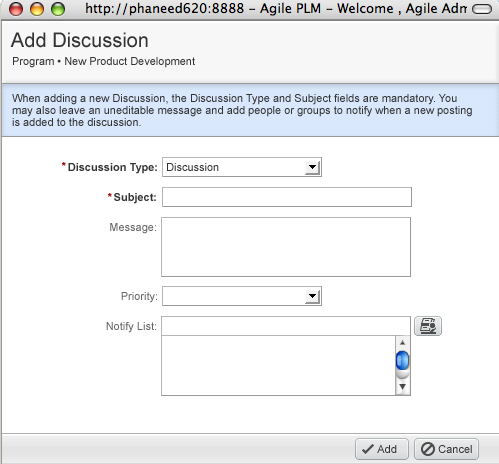
<style>
.page{position:relative;width:499px;height:464px;background:#ffffff}
.page>*{position:absolute;margin:0}
.t1{font:20px "ArialMT";color:#333333}
.t2{font:11px "ArialMT";color:#333333}
.t3{font:11px/12px "ArialMT";color:#333333}
.t4{font:11px "Arial-BoldMT";color:#990000}
.t5{font:11px "Arial-BoldMT";color:#333333}
.t6{font:11px "ArialMT";color:#666666}
</style>
<div class="page">
<p class="t1" style="left:10px;top:32px;width:138px;height:16px">Add Discussion</p>
<p class="t2" style="left:13px;top:57px;width:182px;height:11px">Program • New Product Development</p>
<p class="t3" style="left:12px;top:94px;width:460px;height:32px">When adding a new Discussion, the Discussion Type and Subject fields are mandatory. You <br>may also leave an uneditable message and add people or groups to notify when a new posting <br>is added to the discussion.</p>
<p class="t4" style="left:61px;top:162px;width:5px;height:4px">*</p>
<p class="t5" style="left:68px;top:163px;width:89px;height:11px">Discussion Type:</p>
<p class="t2" style="left:167px;top:163px;width:52px;height:8px">Discussion</p>
<p class="t4" style="left:107px;top:193px;width:5px;height:4px">*</p>
<p class="t5" style="left:114px;top:193px;width:42px;height:11px">Subject:</p>
<p class="t6" style="left:110px;top:223px;width:46px;height:11px">Message:</p>
<p class="t6" style="left:121px;top:292px;width:36px;height:11px">Priority:</p>
<p class="t6" style="left:106px;top:322px;width:50px;height:11px">Notify List:</p>
<p class="t2" style="left:377px;top:445px;width:20px;height:8px">Add</p>
<p class="t2" style="left:438px;top:445px;width:34px;height:8px">Cancel</p>
</div>
